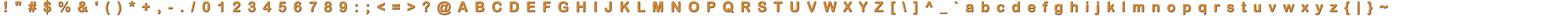
<style>
.page{position:relative;width:1568px;height:16px;background:#ffffff}
.page>*{position:absolute;margin:0}
.t1{font:13.9px "ArialRoundedMTBold";color:#df8c2e}
</style>
<div class="page">
<p class="t1" style="left:4px;top:0px;width:1383px;height:14px">!  "  #  $  %  &amp;  '  (  )  *  +  ,  -  .  /  0  1  2  3  4  5  6  7  8  9  :  ;  &lt;  =  &gt;  ?  @  A  B  C  D  E  F  G  H  I  J  K  L  M  N  O  P  Q  R  S  T  U  V  W  X  Y  Z  [  \  ]  ^  _  `  a  b  c  d  e  f  g  h  i  j  k  l  m  n  o  p  q  r  s  t  u  v  w  x  y  z  {  |  }  ~</p>
</div>
